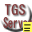
<style>
.page{position:relative;width:32px;height:32px;background:#ffffff}
.page>*{position:absolute;margin:0}
.t1{font:14px "MS-Gothic";color:#813838}
.t2{font:14px "MS-Gothic";color:#813838;scale:0.7 1}
</style>
<div class="page">
<p class="t1" style="left:4px;top:4px;width:22px;height:11px">TGS</p>
<p class="t2" style="left:3px;top:17px;width:29px;height:11px">Server</p>
</div>
